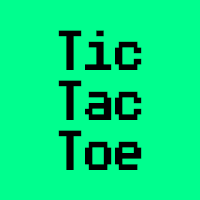
<style>
.page{position:relative;width:200px;height:200px;background:#00fe8e}
.page>*{position:absolute;margin:0}
.t1{font:45px/50px "PublicPixel";color:#000000;scale:0.67 1}
</style>
<div class="page">
<p class="t1" style="left:58px;top:30px;width:84px;height:140px;text-align:center">Tic<br>Tac<br>Toe</p>
</div>
